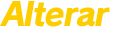
<style>
.page{position:relative;width:116px;height:34px;background:#ffffff}
.page>*{position:absolute;margin:0}
.t1{font:32px "RodinPro-EB";letter-spacing:-0.046em;color:#fecd00;font-style:italic}
</style>
<div class="page">
<p class="t1" style="left:0px;top:1px;width:110px;height:26px">Alterar</p>
</div>
